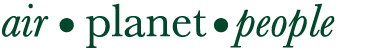
<style>
.page{position:relative;width:370px;height:50px;background:#ffffff}
.page>*{position:absolute;margin:0}
.t1{font:47.4px "Baskerville";letter-spacing:-0.02em;color:#01472b;font-weight:bold}
.t2{font:47.4px "Baskerville-Italic";letter-spacing:-0.02em;color:#01472b;font-weight:bold}
.t3{font:64.2px "MyriadPro-Regular";letter-spacing:-0.05em;color:#01472b;font-weight:bold}
.t4{font:64.2px "MyriadPro-Regular";letter-spacing:-0.16em;color:#01472b;font-weight:bold}
</style>
<div class="page">
<p class="t1" style="left:2px;top:3px;width:333px;height:45px"><span class="t2">air </span><span class="t3">• </span>planet <span class="t4">• </span><span class="t2">people</span></p>
</div>
